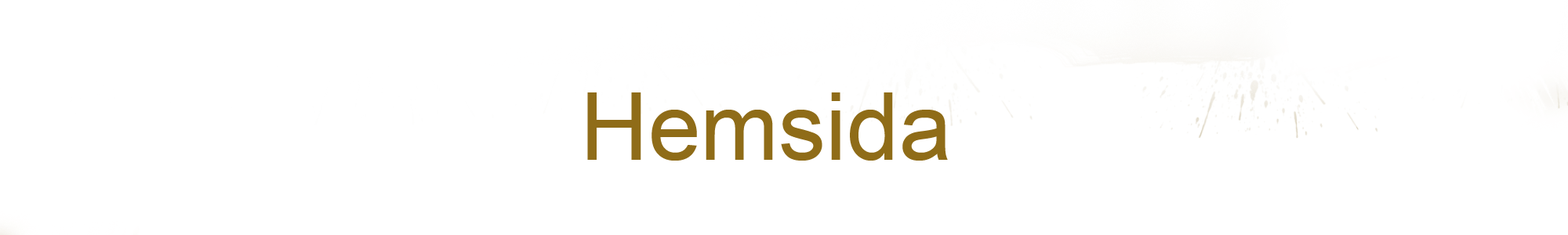
<style>
.page{position:relative;width:1568px;height:235px;background:#ffffff}
.page>*{position:absolute;margin:0}
.t1{font:94.1px "ArialMT";color:#8f6c18}
</style>
<div class="page">
<p class="t1" style="left:587px;top:93px;width:361px;height:68px">Hemsida</p>
</div>
